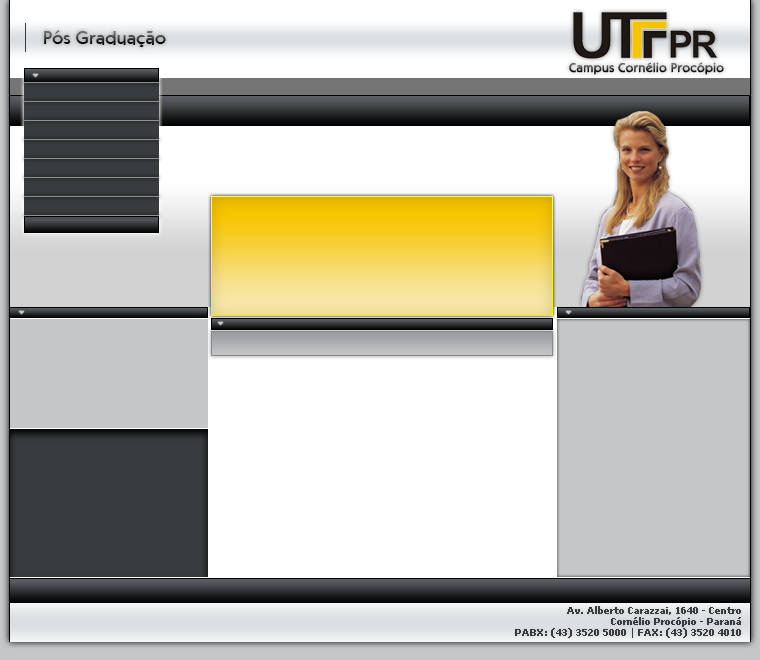
<style>
.page{position:relative;width:760px;height:660px;background:#ffffff}
.page>*{position:absolute;margin:0}
.t1{font:18px "KabobRegular"}
.t2{font:13px "KabobRegular"}
.t3{font:9px "Verdana-Bold";color:#393c3f}
</style>
<div class="page">
<p class="t1" style="left:44px;top:30px;width:122px;height:17px">Pós Graduação</p>
<p class="t2" style="left:569px;top:62px;width:155px;height:13px">Campus Cornélio Procópio</p>
<p class="t3" style="left:515px;top:606px;width:226px;height:32px;text-align:right">Av. Alberto Carazzai, 1640 - Centro<br>Cornélio Procópio - Paraná<br>PABX: (43) 3520 5000 | FAX: (43) 3520 4010</p>
</div>
